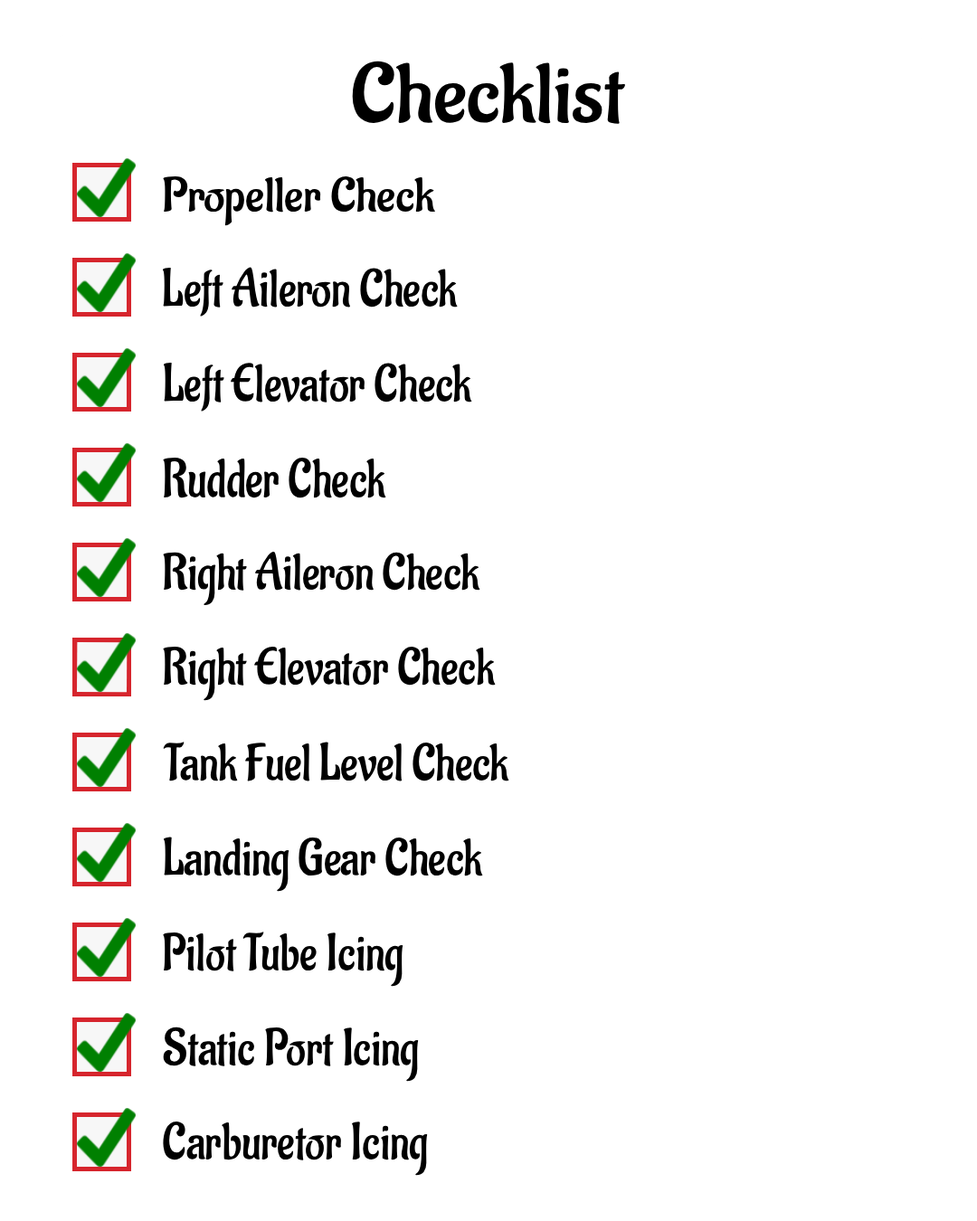
<style>
.page{position:relative;width:977px;height:1221px;background:#ffffff}
.page>*{position:absolute;margin:0}
.t1{font:83.7px "Aladin-Regular";color:#000000;scale:1.08 1}
.t2{font:48px "Aladin-Regular";color:#000000;scale:1.06 1}
.t3{font:52.6px "Aladin-Regular";color:#000000;scale:0.91 1}
.t4{font:52.6px "Aladin-Regular";color:#000000;scale:0.9 1}
.t5{font:54.5px "Aladin-Regular";color:#000000;scale:0.87 1}
.t6{font:50.9px "Aladin-Regular";color:#000000;scale:0.93 1}
.t7{font:51.7px "Aladin-Regular";color:#000000;scale:0.92 1}
</style>
<div class="page">
<p class="t1" style="left:352px;top:61px;width:273px;height:63px">Checklist</p>
<p class="t2" style="left:163px;top:176px;width:272px;height:50px">Propeller Check</p>
<p class="t3" style="left:163px;top:267px;width:295px;height:50px">Left Aileron Check</p>
<p class="t4" style="left:163px;top:362px;width:309px;height:49px">Left Elevator Check</p>
<p class="t5" style="left:163px;top:458px;width:223px;height:40px">Rudder Check</p>
<p class="t6" style="left:163px;top:552px;width:317px;height:53px">Right Aileron Check</p>
<p class="t7" style="left:163px;top:647px;width:333px;height:54px">Right Elevator Check</p>
<p class="t7" style="left:163px;top:742px;width:346px;height:40px">Tank Fuel Level Check</p>
<p class="t7" style="left:163px;top:837px;width:320px;height:55px">Landing Gear Check</p>
<p class="t7" style="left:163px;top:931px;width:240px;height:56px">Pilot Tube Icing</p>
<p class="t7" style="left:163px;top:1026px;width:256px;height:56px">Static Port Icing</p>
<p class="t7" style="left:163px;top:1121px;width:265px;height:55px">Carburetor Icing</p>
</div>
